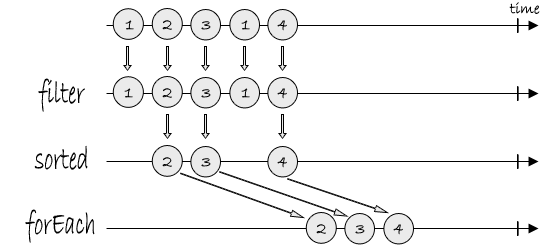
<style>
.page{position:relative;width:550px;height:250px;background:#ffffff}
.page>*{position:absolute;margin:0}
.t1{font:15.9px "BradleyHandITC";color:#000000}
.t2{font:16.7px "BradleyHandITC";color:#000000}
.t3{font:33.3px "BradleyHandITC";color:#000000;scale:0.66 1}
</style>
<div class="page">
<p class="t1" style="left:509px;top:2px;width:31px;height:12px">time</p>
<p class="t2" style="left:125px;top:20px;width:9px;height:10px">1</p>
<p class="t2" style="left:162px;top:20px;width:10px;height:10px">2</p>
<p class="t2" style="left:201px;top:21px;width:10px;height:9px">3</p>
<p class="t2" style="left:241px;top:20px;width:9px;height:10px">1</p>
<p class="t2" style="left:277px;top:20px;width:10px;height:11px">4</p>
<p class="t3" style="left:38px;top:78px;width:47px;height:34px">filter</p>
<p class="t2" style="left:124px;top:88px;width:9px;height:10px">1</p>
<p class="t2" style="left:162px;top:88px;width:10px;height:10px">2</p>
<p class="t2" style="left:201px;top:89px;width:10px;height:9px">3</p>
<p class="t2" style="left:241px;top:88px;width:9px;height:10px">1</p>
<p class="t2" style="left:277px;top:88px;width:10px;height:11px">4</p>
<p class="t3" style="left:34px;top:145px;width:54px;height:25px">sorted</p>
<p class="t2" style="left:162px;top:157px;width:10px;height:10px">2</p>
<p class="t2" style="left:201px;top:158px;width:10px;height:9px">3</p>
<p class="t2" style="left:277px;top:157px;width:10px;height:11px">4</p>
<p class="t3" style="left:25px;top:209px;width:70px;height:34px;text-align:right">forEach<br>h</p>
<p class="t2" style="left:316px;top:224px;width:10px;height:10px">2</p>
<p class="t2" style="left:355px;top:225px;width:10px;height:9px">3</p>
<p class="t2" style="left:393px;top:224px;width:10px;height:11px">4</p>
</div>
